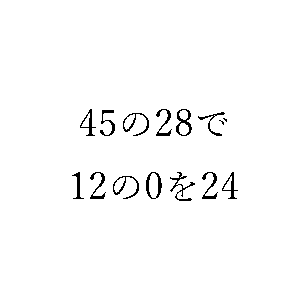
<style>
.page{position:relative;width:300px;height:300px;background:#ffffff}
.page>*{position:absolute;margin:0}
.t1{font:36px "YuMincho-Regular";color:#000000}
</style>
<div class="page">
<p class="t1" style="left:72px;top:109px;width:166px;height:92px;text-align:center">45の28で<br>12の0を24</p>
</div>
